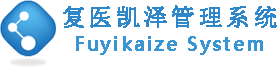
<style>
.page{position:relative;width:279px;height:68px;background:#ffffff}
.page>*{position:absolute;margin:0}
.t1{font:24px "NSimSun";letter-spacing:0.1em;color:#2d87c9;font-weight:bold}
.t2{font:18px "MicrosoftYaHei";letter-spacing:0.1em;color:#3a95d3;font-weight:bold}
</style>
<div class="page">
<p class="t1" style="left:63px;top:5px;width:214px;height:23px">复医凯泽管理系统</p>
<p class="t2" style="left:76px;top:36px;width:187px;height:19px">Fuyikaize System</p>
</div>
